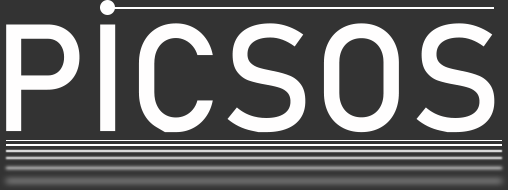
<style>
.page{position:relative;width:508px;height:190px;background:#333333}
.page>*{position:absolute;margin:0}
.t1{font:150px "Bahnschrift";color:#fffefe}
</style>
<div class="page">
<p class="t1" style="left:6px;top:23px;width:489px;height:110px">PICSOS</p>
</div>
